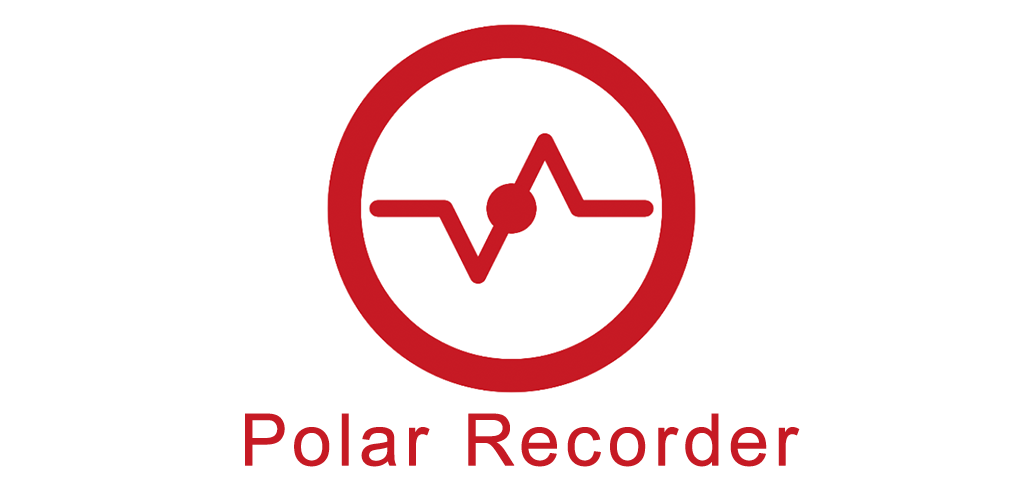
<style>
.page{position:relative;width:1024px;height:500px;background:#ffffff}
.page>*{position:absolute;margin:0}
.t1{font:72px "ArialMT";letter-spacing:0.075em;color:#c61a24;font-weight:bold}
</style>
<div class="page">
<p class="t1" style="left:245px;top:413px;width:555px;height:54px">Polar Recorder</p>
</div>
